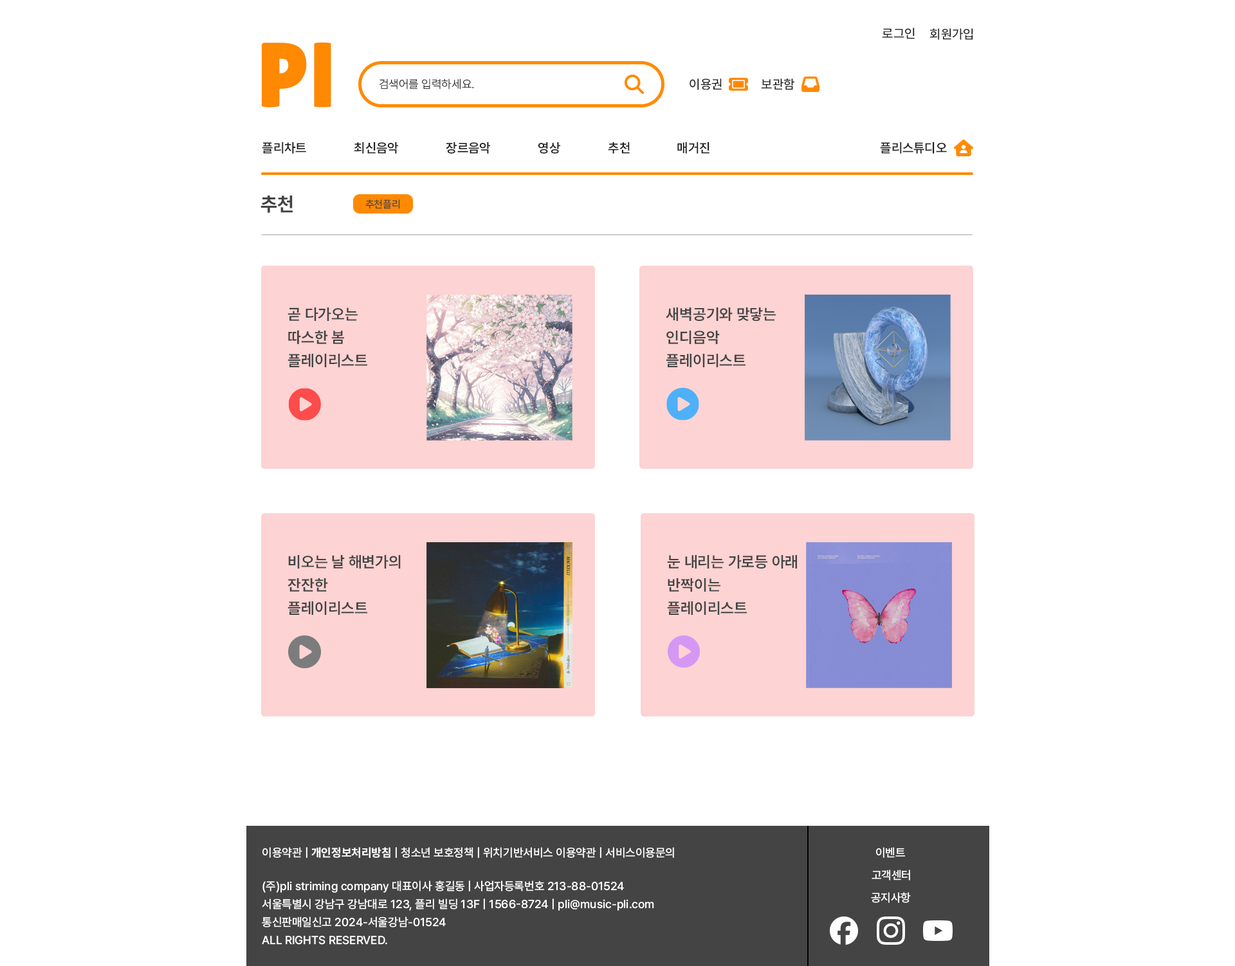
<style>
.page{position:relative;width:1235px;height:966px;background:#ffffff}
.page>*{position:absolute;margin:0}
.t1{font:12.9px "Pretendard-Medium";color:#222222}
.t2{font:11.6px "Pretendard-Light";color:#222222}
.t3{font:12.9px "Pretendard-SemiBold";color:#222222}
.t4{font:19.3px "Pretendard-Bold";color:#444444}
.t5{font:10.3px "Pretendard-Regular";color:#444444}
.t6{font:15.4px/23.1px "Pretendard-SemiBold";color:#444444}
.t7{font:11.6px "Pretendard-Medium";color:#ffffff}
.t8{font:11.6px "Pretendard-Bold";color:#ffffff}
.t9{font:11.6px/18px "Pretendard-Medium";color:#ffffff}
</style>
<div class="page">
<p class="t1" style="left:882px;top:28px;width:32px;height:11px">로그인</p>
<p class="t1" style="left:929px;top:28px;width:44px;height:12px">회원가입</p>
<p class="t2" style="left:379px;top:78px;width:95px;height:11px">검색어를 입력하세요.</p>
<p class="t1" style="left:689px;top:78px;width:32px;height:12px">이용권</p>
<p class="t1" style="left:761px;top:78px;width:33px;height:12px">보관함</p>
<p class="t3" style="left:262px;top:142px;width:44px;height:12px">플리차트</p>
<p class="t3" style="left:354px;top:142px;width:44px;height:12px">최신음악</p>
<p class="t3" style="left:446px;top:142px;width:44px;height:12px">장르음악</p>
<p class="t3" style="left:538px;top:142px;width:22px;height:12px">영상</p>
<p class="t3" style="left:608px;top:142px;width:22px;height:12px">추천</p>
<p class="t3" style="left:677px;top:142px;width:32px;height:12px">매거진</p>
<p class="t3" style="left:880px;top:142px;width:67px;height:12px">플리스튜디오</p>
<p class="t4" style="left:260px;top:195px;width:33px;height:18px">추천</p>
<p class="t5" style="left:365px;top:199px;width:35px;height:10px">추천플리</p>
<p class="t6" style="left:287px;top:307px;width:80px;height:60px">곧 다가오는<br>따스한 봄<br>플레이리스트</p>
<p class="t6" style="left:666px;top:307px;width:109px;height:60px">새벽공기와 맞닿는<br>인디음악<br>플레이리스트</p>
<p class="t6" style="left:287px;top:555px;width:114px;height:60px">비오는 날 해변가의<br>잔잔한<br>플레이리스트</p>
<p class="t6" style="left:667px;top:555px;width:130px;height:60px">눈 내리는 가로등 아래<br>반짝이는<br>플레이리스트</p>
<p class="t7" style="left:262px;top:847px;width:412px;height:11px">이용약관 | <span class="t8">개인정보처리방침</span> | 청소년 보호정책 | 위치기반서비스 이용약관 | 서비스이용문의</p>
<p class="t7" style="left:876px;top:847px;width:29px;height:11px">이벤트</p>
<p class="t7" style="left:871px;top:869px;width:39px;height:11px">고객센터</p>
<p class="t9" style="left:262px;top:880px;width:392px;height:65px">(주)pli striming company 대표이사 홍길동 | 사업자등록번호 213-88-01524<br>서울특별시 강남구 강남대로 123, 플리 빌딩 13F | 1566-8724 | pli@music-pli.com<br>통신판매일신고 2024-서울강남-01524      <br>ALL RIGHTS RESERVED.</p>
<p class="t7" style="left:871px;top:892px;width:40px;height:11px">공지사항</p>
</div>
